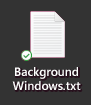
<style>
.page{position:relative;width:91px;height:105px;background:#333333}
.page>*{position:absolute;margin:0}
.t1{font:12px "SegoeUI-Semibold";color:#ffffff}
</style>
<div class="page">
<p class="t1" style="left:12px;top:67px;width:69px;height:23px;text-align:center">Background<br>Windows.txt</p>
</div>
